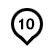
<style>
.page{position:relative;width:55px;height:55px;background:#ffffff}
.page>*{position:absolute;margin:0}
.t1{font:15px "TrebuchetMS-Bold";color:#000000}
</style>
<div class="page">
<p class="t1" style="left:19px;top:18px;width:16px;height:12px">10</p>
</div>
